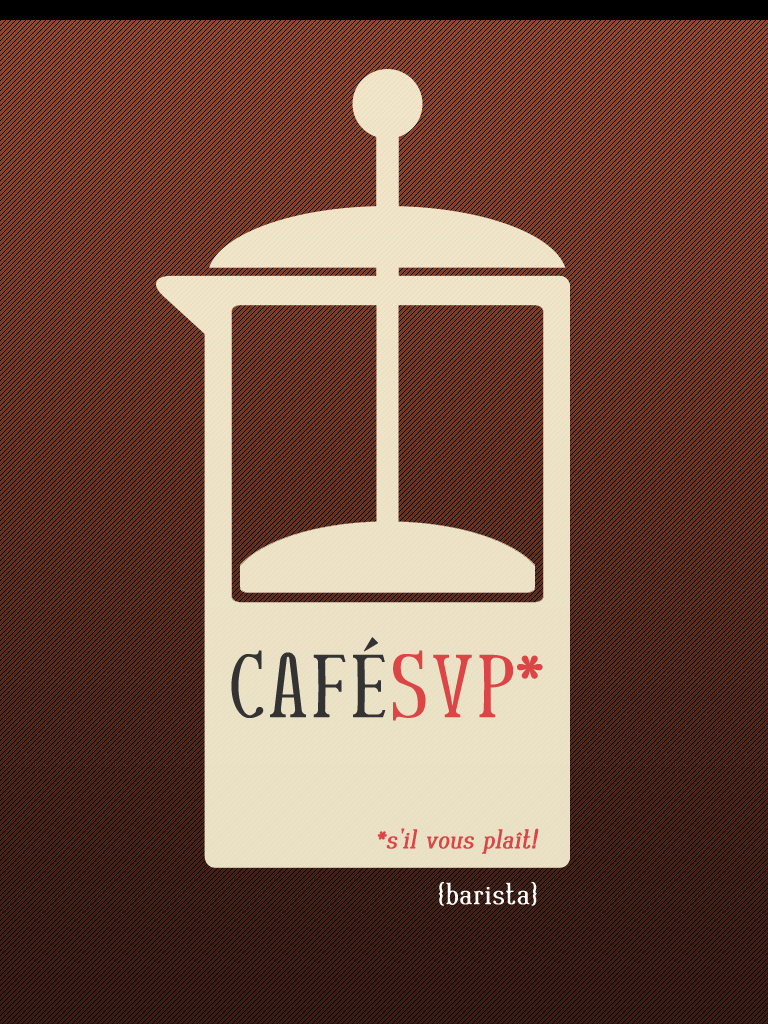
<style>
.page{position:relative;width:768px;height:1024px}
.page>*{position:absolute;margin:0}
.t1{font:88.2px "RutabanNormal";color:#333333;font-weight:bold}
.t2{font:88.2px "RutabanNormal";color:#db4545;font-weight:bold}
.t3{font:88.2px "RutabanNormal";letter-spacing:-0.04em;color:#db4545;font-weight:bold}
.t4{font:79.2px "RutabanNormal";letter-spacing:-0.02em;color:#db4545;font-weight:bold}
.t5{font:26.5px "RutabanNormal";color:#db4545;font-weight:bold;font-style:italic}
.t6{font:30px "RutabanNormal";color:#ffffff;font-weight:bold}
</style>
<div class="page">
<p class="t1" style="left:231px;top:637px;width:312px;height:84px">CAFÉ<span class="t2">SV</span><span class="t3">P</span><span class="t4">*</span></p>
<p class="t5" style="left:377px;top:828px;width:162px;height:26px">*s'il vous plaît!</p>
<p class="t6" style="left:438px;top:882px;width:99px;height:24px">{barista}</p>
</div>
